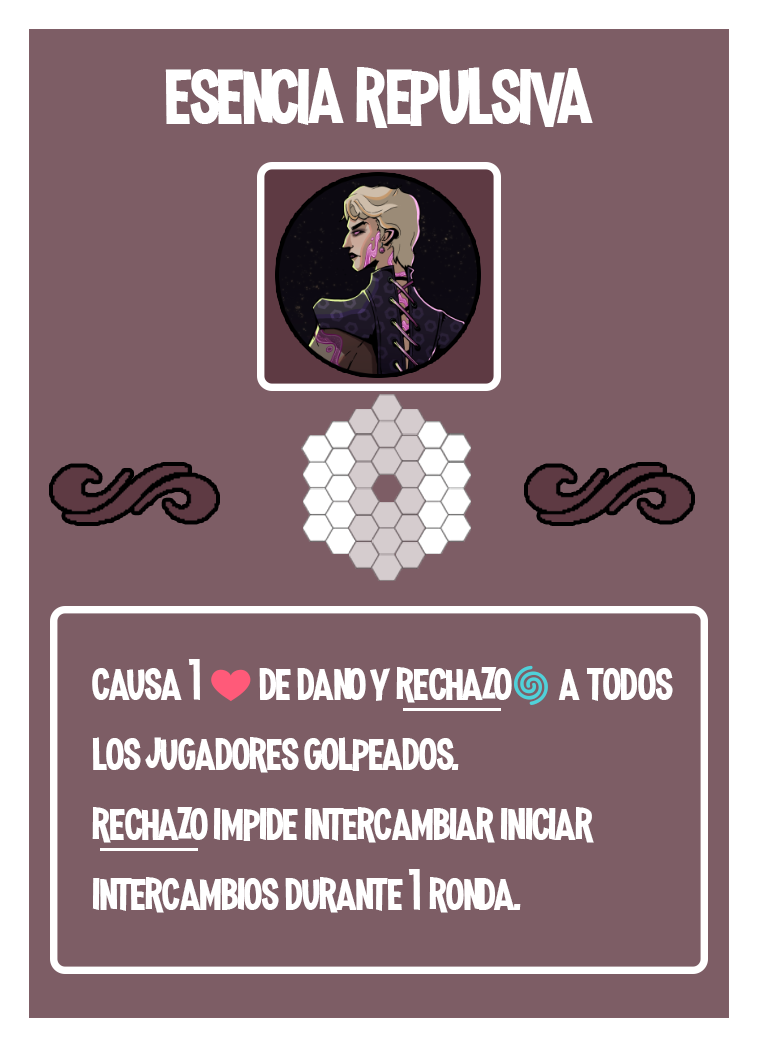
<style>
.page{position:relative;width:758px;height:1047px;background:#7d5d65}
.page>*{position:absolute;margin:0}
.t1{font:100px "MadnessHyperactive";color:#ffffff}
.t2{font:58.3px "MadnessHyperactive";color:#ffffff}
.t3{font:41.7px "EmojiOneColor";color:#ffffff}
</style>
<div class="page">
<p class="t1" style="left:165px;top:67px;width:428px;height:61px">esencia repulsiva</p>
<p class="t2" style="left:92px;top:659px;width:581px;height:254px">causa 1 <span class="t3">❤️ </span>de dano y rechazo<span class="t3">🌀</span> a todos los jugadores golpeados.<br>rechazo impide intercambiar iniciar intercambios durante 1 ronda.</p>
</div>
